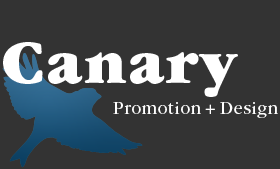
<style>
.page{position:relative;width:280px;height:169px;background:#333333}
.page>*{position:absolute;margin:0}
.t1{font:64.3px "ITCGaramondStd-Ult";letter-spacing:0.027em;color:#ffffff}
.t2{font:18px "ITCGaramondStd-Bk";letter-spacing:0.027em;color:#ffffff}
</style>
<div class="page">
<p class="t1" style="left:3px;top:42px;width:235px;height:55px">Canary</p>
<p class="t2" style="left:113px;top:102px;width:165px;height:16px">Promotion+Design</p>
</div>
